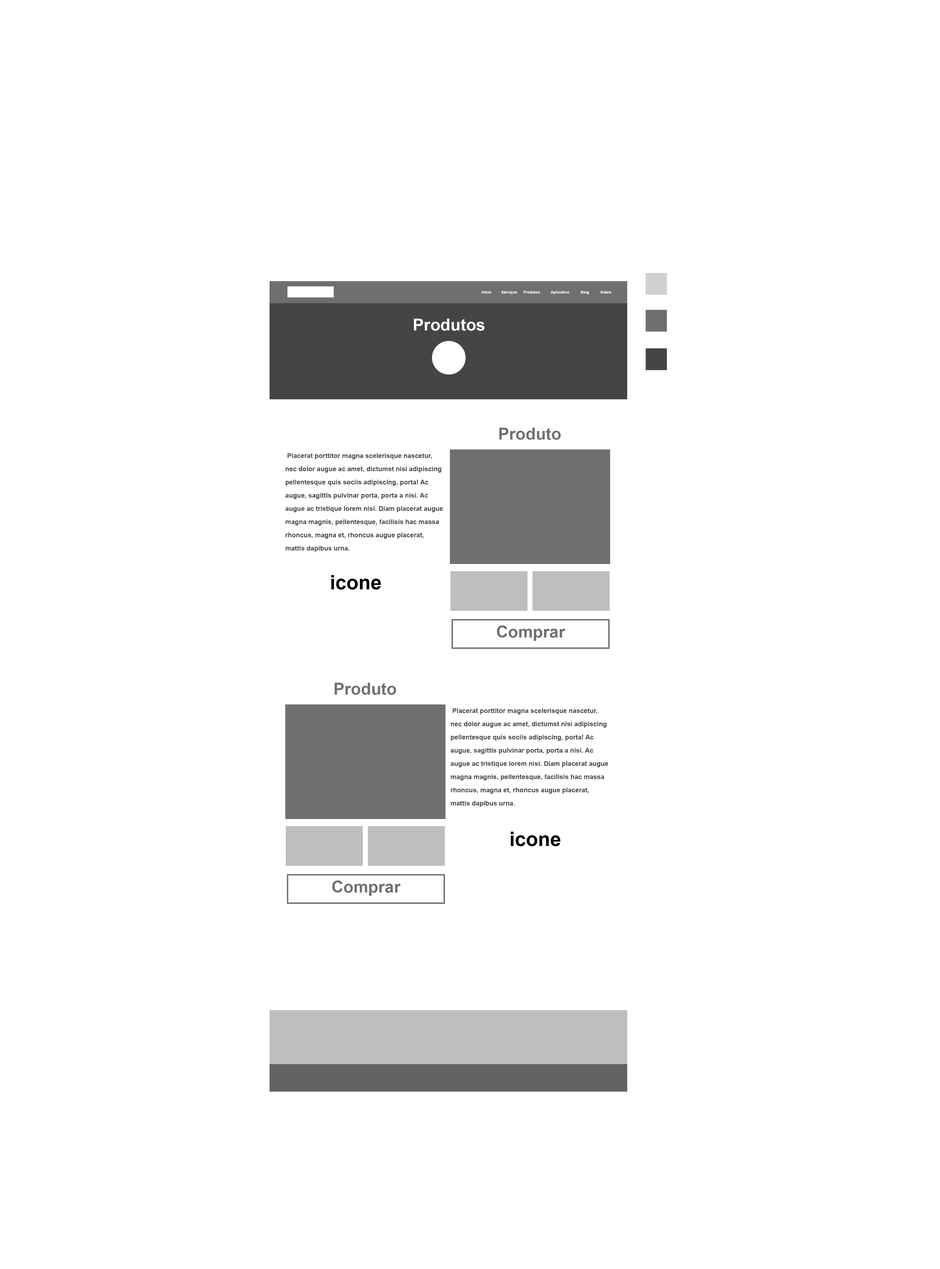
<style>
.page{position:relative;width:940px;height:1269px;background:#ffffff}
.page>*{position:absolute;margin:0}
.t1{font:3.9px "Arial-BoldMT";color:#ffffff}
.t2{font:16.5px "Arial-BoldMT";color:#ffffff}
.t3{font:16.5px "Arial-BoldMT";color:#6f6f6f}
.t4{font:6.6px/13.2px "Arial-BoldMT";color:#454545}
.t5{font:6.6px/13.2px "Arial-BoldMT";color:#ffffff}
.t6{font:16.5px/13.2px "Arial-BoldMT";color:#ffffff}
.t7{font:19.8px "Arial-BoldMT";color:#000000}
</style>
<div class="page">
<p class="t1" style="left:482px;top:290px;width:129px;height:4px">Início   Serviços     Produtos   Aplicativo   Blog    Sobre</p>
<p class="t2" style="left:414px;top:319px;width:71px;height:12px">Produtos</p>
<p class="t3" style="left:499px;top:428px;width:62px;height:12px">Produto</p>
<p class="t4" style="left:285px;top:453px;width:158px;height:99px">Placerat porttitor magna scelerisque nascetur, nec dolor augue ac amet, dictumst nisi adipiscing pellentesque quis sociis adipiscing, porta! Ac augue, sagittis pulvinar porta, porta a nisi. Ac augue ac tristique lorem nisi. Diam placerat augue magna magnis, pellentesque, facilisis hac massa rhoncus, magna et, rhoncus augue placerat, mattis dapibus urna.<span class="t5">tur, nec dolor augue ac amet, dictumst nisi adipiscing pelle</span><span class="t6">ntesque quis so</span></p>
<p class="t7" style="left:331px;top:575px;width:50px;height:14px">icone</p>
<p class="t3" style="left:497px;top:625px;width:68px;height:16px">Comprar</p>
<p class="t3" style="left:335px;top:683px;width:61px;height:12px">Produto</p>
<p class="t4" style="left:450px;top:708px;width:158px;height:99px">Placerat porttitor magna scelerisque nascetur, nec dolor augue ac amet, dictumst nisi adipiscing pellentesque quis sociis adipiscing, porta! Ac augue, sagittis pulvinar porta, porta a nisi. Ac augue ac tristique lorem nisi. Diam placerat augue magna magnis, pellentesque, facilisis hac massa rhoncus, magna et, rhoncus augue placerat, mattis dapibus urna.<span class="t5">tur, nec dolor augue ac amet, dictumst nisi adipiscing pelle</span><span class="t6">ntesque quis so</span></p>
<p class="t7" style="left:511px;top:831px;width:50px;height:15px">icone</p>
<p class="t3" style="left:332px;top:880px;width:69px;height:16px">Comprar</p>
</div>
